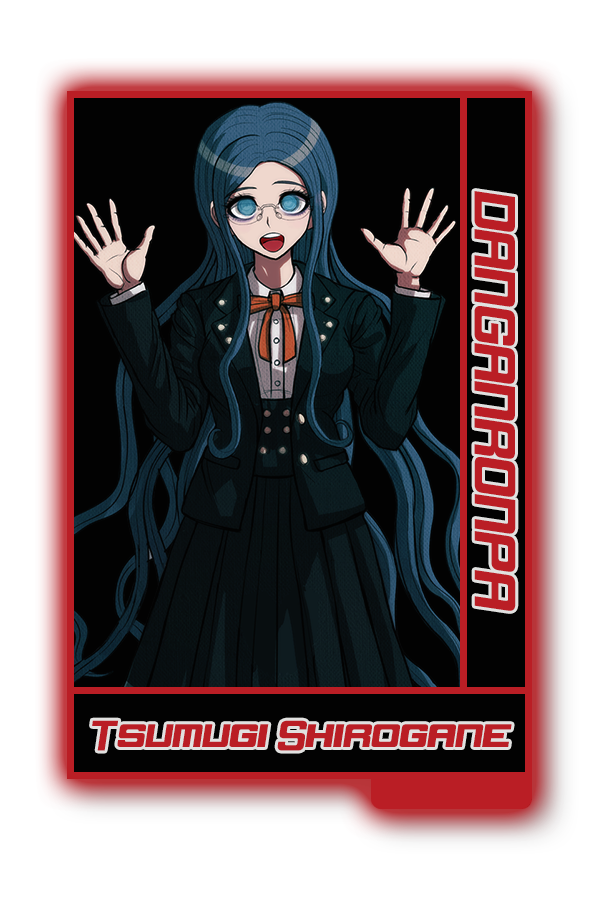
<style>
.page{position:relative;width:600px;height:900px;background:#ffffff}
.page>*{position:absolute;margin:0}
.t1{font:48.8px "DorBlue";color:#bb2c2e}
.t2{font:35.7px "DorBlue";color:#bb2c2e}
</style>
<div class="page">
<p class="t1" style="left:474px;top:191px;width:42px;height:420px;rotate:90deg">DANGANRONPA</p>
<p class="t2" style="left:92px;top:720px;width:420px;height:31px">Tsumugi Shirogane</p>
</div>
